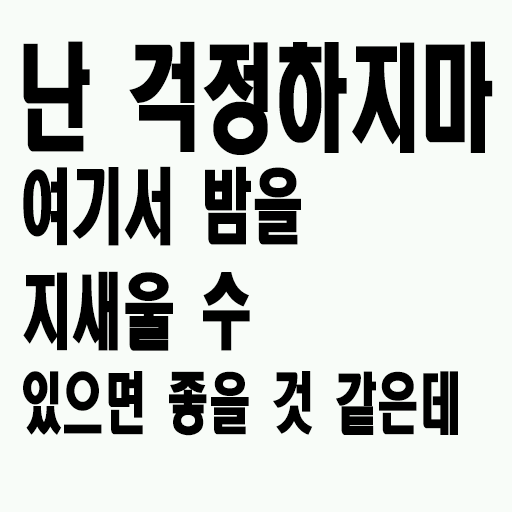
<style>
.page{position:relative;width:512px;height:512px;background:#f8fcf8}
.page>*{position:absolute;margin:0}
.t1{font:115.9px "HeadlineR-HM";color:#000000;scale:0.63 1}
.t2{font:81.7px/105px "HeadlineR-HM";color:#000000;scale:0.63 1}
.t3{font:66.5px "HeadlineR-HM";color:#000000;scale:0.63 1}
</style>
<div class="page">
<p class="t1" style="left:23px;top:41px;width:470px;height:114px">난 걱정하지마</p>
<p class="t2" style="left:23px;top:166px;width:278px;height:185px">여기서 밤을<br>지새울 수</p>
<p class="t3" style="left:23px;top:371px;width:435px;height:65px">있으면 좋을 것 같은데</p>
</div>
